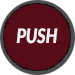
<style>
.page{position:relative;width:75px;height:75px;background:#580b19}
.page>*{position:absolute;margin:0}
.t1{font:20px "Lato-BlackItalic";letter-spacing:-0.02em;color:#efefef;scale:0.83 1}
</style>
<div class="page">
<p class="t1" style="left:16px;top:28px;width:42px;height:16px">PUSH</p>
</div>
